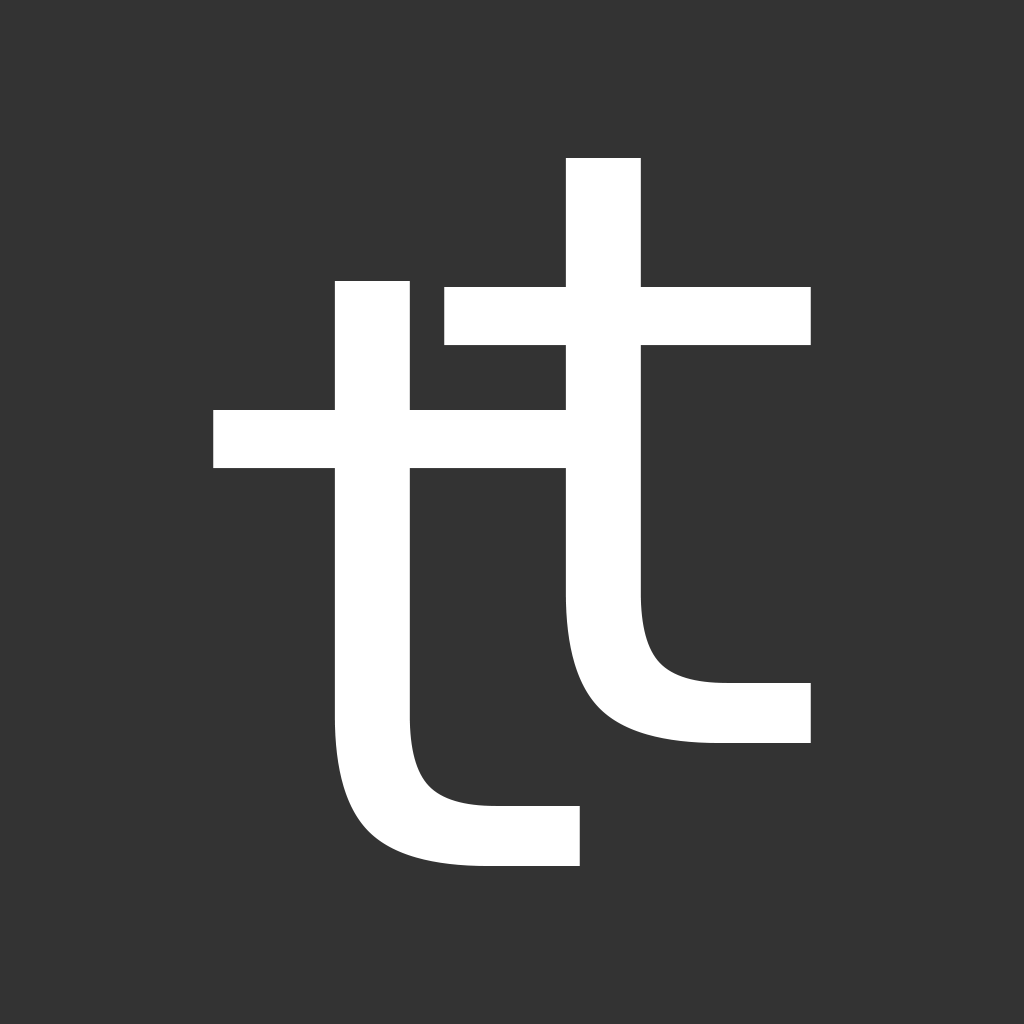
<style>
.page{position:relative;width:1024px;height:1024px;background:#333333}
.page>*{position:absolute;margin:0}
.t1{font:833.3px "Menlo-Regular";color:#ffffff}
</style>
<div class="page">
<p class="t1" style="left:444px;top:158px;width:367px;height:585px">t</p>
<p class="t1" style="left:213px;top:281px;width:367px;height:585px">t</p>
</div>
